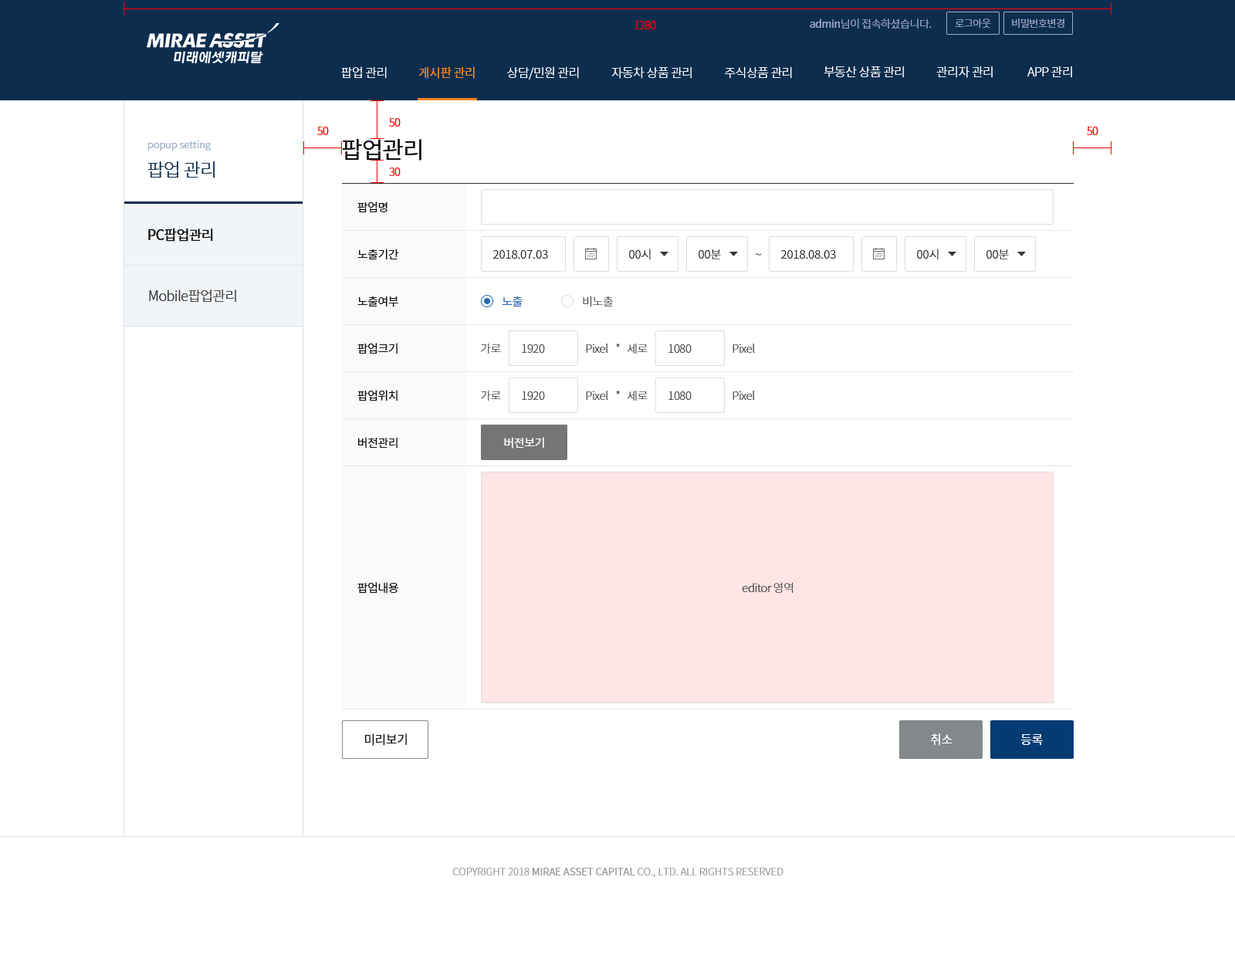
<style>
.page{position:relative;width:1235px;height:965px;background:#ffffff}
.page>*{position:absolute;margin:0}
.t1{font:10.8px "NotoSansCJKkr-Light";letter-spacing:-0.03em;color:#ff0000}
.t2{font:10.8px "NotoSansCJKkr-Light";letter-spacing:-0.03em;color:#99aac7}
.t3{font:10.8px "NotoSansCJKkr-Regular";letter-spacing:-0.03em;color:#99aac7}
.t4{font:10px "NotoSansCJKkr-Light";letter-spacing:-0.03em;color:#9fafca}
.t5{font:12.4px "NotoSansCJKkr-Light";letter-spacing:-0.03em;color:#ffffff}
.t6{font:12.4px "NotoSansCJKkr-Regular";letter-spacing:-0.03em;color:#f58220}
.t7{font:10px "NotoSansCJKkr-Light";color:#99aac7}
.t8{font:23.2px "NotoSansCJKkr-Regular";letter-spacing:-0.03em;color:#0f0f0f}
.t9{font:18.5px "NotoSansCJKkr-Light";letter-spacing:-0.03em;color:#0c2d4e}
.t10{font:11.6px/47.1px "NotoSansCJKkr-Regular";letter-spacing:-0.03em;color:#0f0f0f}
.t11{font:13.9px "NotoSansCJKkr-Regular";letter-spacing:-0.03em;color:#0f0f0f}
.t12{font:11.6px "NotoSansCJKkr-Light";color:#0f0f0f}
.t13{font:11.6px "NotoSansCJKkr-Light"}
.t14{font:13.9px "NotoSansCJKkr-Light";letter-spacing:-0.03em;color:#404040}
.t15{font:11.6px "NotoSansCJKkr-Regular";letter-spacing:-0.03em;color:#2469b0}
.t16{font:11.6px "NotoSansCJKkr-Light";letter-spacing:-0.03em;color:#404040}
.t17{font:11.6px "NotoSansCJKkr-Regular";letter-spacing:-0.03em;color:#ffffff}
.t18{font:11.6px "NotoSansCJKkr-Regular";letter-spacing:-0.03em;color:#0f0f0f}
.t19{font:12.4px "NotoSansCJKkr-Regular";letter-spacing:-0.03em;color:#0f0f0f}
.t20{font:12.4px "NotoSansCJKkr-Regular";letter-spacing:-0.03em;color:#ffffff}
.t21{font:10px "NotoSansCJKkr-Light";color:#999999}
.t22{font:10px "NotoSansCJKkr-Regular";color:#999999}
</style>
<div class="page">
<p class="t1" style="left:635px;top:21px;width:21px;height:8px">1280</p>
<p class="t2" style="left:810px;top:19px;width:122px;height:10px"><span class="t3">admin</span>님이 접속하셨습니다.</p>
<p class="t4" style="left:955px;top:19px;width:36px;height:9px">로그아웃</p>
<p class="t4" style="left:1012px;top:19px;width:53px;height:9px">비밀번호변경</p>
<p class="t5" style="left:824px;top:66px;width:80px;height:12px">부동산 상품 관리</p>
<p class="t5" style="left:937px;top:66px;width:56px;height:12px">관리자 관리</p>
<p class="t5" style="left:1028px;top:66px;width:45px;height:12px">APP 관리</p>
<p class="t5" style="left:341px;top:66px;width:46px;height:13px">팝업 관리</p>
<p class="t6" style="left:419px;top:66px;width:56px;height:13px">게시판 관리</p>
<p class="t5" style="left:507px;top:66px;width:72px;height:14px">상담/민원 관리</p>
<p class="t5" style="left:612px;top:66px;width:80px;height:13px">자동차 상품 관리</p>
<p class="t5" style="left:725px;top:66px;width:67px;height:13px">주식상품 관리</p>
<p class="t1" style="left:389px;top:118px;width:12px;height:9px">50</p>
<p class="t1" style="left:317px;top:127px;width:12px;height:8px">50</p>
<p class="t1" style="left:1087px;top:127px;width:12px;height:8px">50</p>
<p class="t7" style="left:148px;top:141px;width:63px;height:10px">popup setting</p>
<p class="t8" style="left:342px;top:139px;width:80px;height:22px">팝업관리</p>
<p class="t9" style="left:147px;top:161px;width:68px;height:17px">팝업 관리</p>
<p class="t1" style="left:389px;top:168px;width:12px;height:8px">30</p>
<p class="t10" style="left:358px;top:202px;width:41px;height:247px">팝업명<br>노출기간<br>노출여부<br>팝업크기<br>팝업위치<br>버전관리</p>
<p class="t11" style="left:148px;top:228px;width:65px;height:14px">PC팝업관리</p>
<p class="t12" style="left:493px;top:250px;width:55px;height:9px">2018.07.03</p>
<p class="t12" style="left:629px;top:249px;width:22px;height:10px">00시</p>
<p class="t12" style="left:699px;top:249px;width:22px;height:10px">00분</p>
<p class="t13" style="left:756px;top:253px;width:5px;height:3px">~</p>
<p class="t12" style="left:781px;top:250px;width:55px;height:9px">2018.08.03</p>
<p class="t12" style="left:917px;top:249px;width:22px;height:10px">00시</p>
<p class="t12" style="left:987px;top:249px;width:22px;height:10px">00분</p>
<p class="t14" style="left:149px;top:290px;width:87px;height:12px">Mobile팝업관리</p>
<p class="t15" style="left:502px;top:296px;width:21px;height:11px">노출</p>
<p class="t16" style="left:583px;top:296px;width:30px;height:11px">비노출</p>
<p class="t16" style="left:481px;top:343px;width:20px;height:11px">가로</p>
<p class="t16" style="left:522px;top:344px;width:23px;height:9px">1920</p>
<p class="t16" style="left:586px;top:344px;width:22px;height:9px">Pixel</p>
<p class="t16" style="left:616px;top:344px;width:4px;height:3px">*</p>
<p class="t16" style="left:627px;top:344px;width:21px;height:10px">세로</p>
<p class="t16" style="left:669px;top:344px;width:23px;height:9px">1080</p>
<p class="t16" style="left:733px;top:344px;width:22px;height:9px">Pixel</p>
<p class="t16" style="left:481px;top:390px;width:20px;height:11px">가로</p>
<p class="t16" style="left:522px;top:391px;width:23px;height:9px">1920</p>
<p class="t16" style="left:586px;top:391px;width:22px;height:9px">Pixel</p>
<p class="t16" style="left:616px;top:391px;width:4px;height:4px">*</p>
<p class="t16" style="left:627px;top:391px;width:21px;height:11px">세로</p>
<p class="t16" style="left:669px;top:391px;width:23px;height:9px">1080</p>
<p class="t16" style="left:733px;top:391px;width:22px;height:9px">Pixel</p>
<p class="t17" style="left:504px;top:437px;width:40px;height:12px">버전보기</p>
<p class="t18" style="left:358px;top:582px;width:40px;height:12px">팝업내용</p>
<p class="t16" style="left:742px;top:582px;width:52px;height:11px">editor 영역</p>
<p class="t19" style="left:365px;top:734px;width:42px;height:12px">미리보기</p>
<p class="t20" style="left:931px;top:734px;width:22px;height:12px">취소</p>
<p class="t20" style="left:1021px;top:734px;width:22px;height:11px">등록</p>
<p class="t21" style="left:452px;top:868px;width:332px;height:10px">COPYRIGHT 2018 <span class="t22">MIRAE ASSET CAPITAL</span> CO., LTD. ALL RIGHTS RESERVED</p>
</div>
